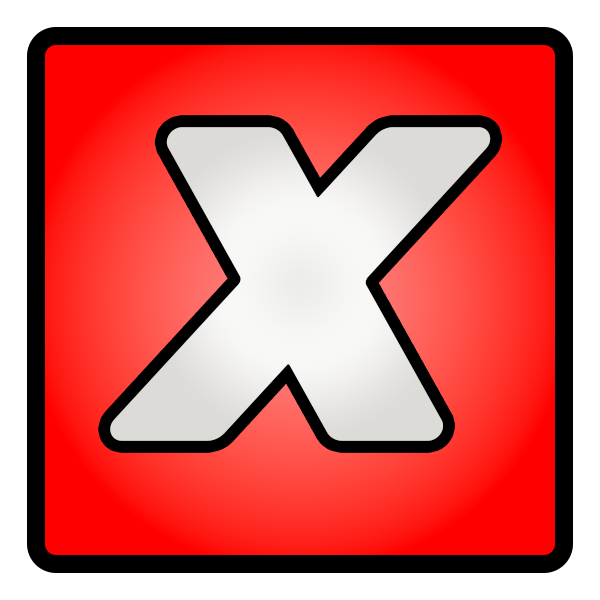
<style>
.page{position:relative;width:600px;height:600px}
.page>*{position:absolute;margin:0}
.t1{font:489.3px "DesignerRegular";color:#edecea}
</style>
<div class="page">
<p class="t1" style="left:110px;top:127px;width:381px;height:314px">x</p>
</div>
